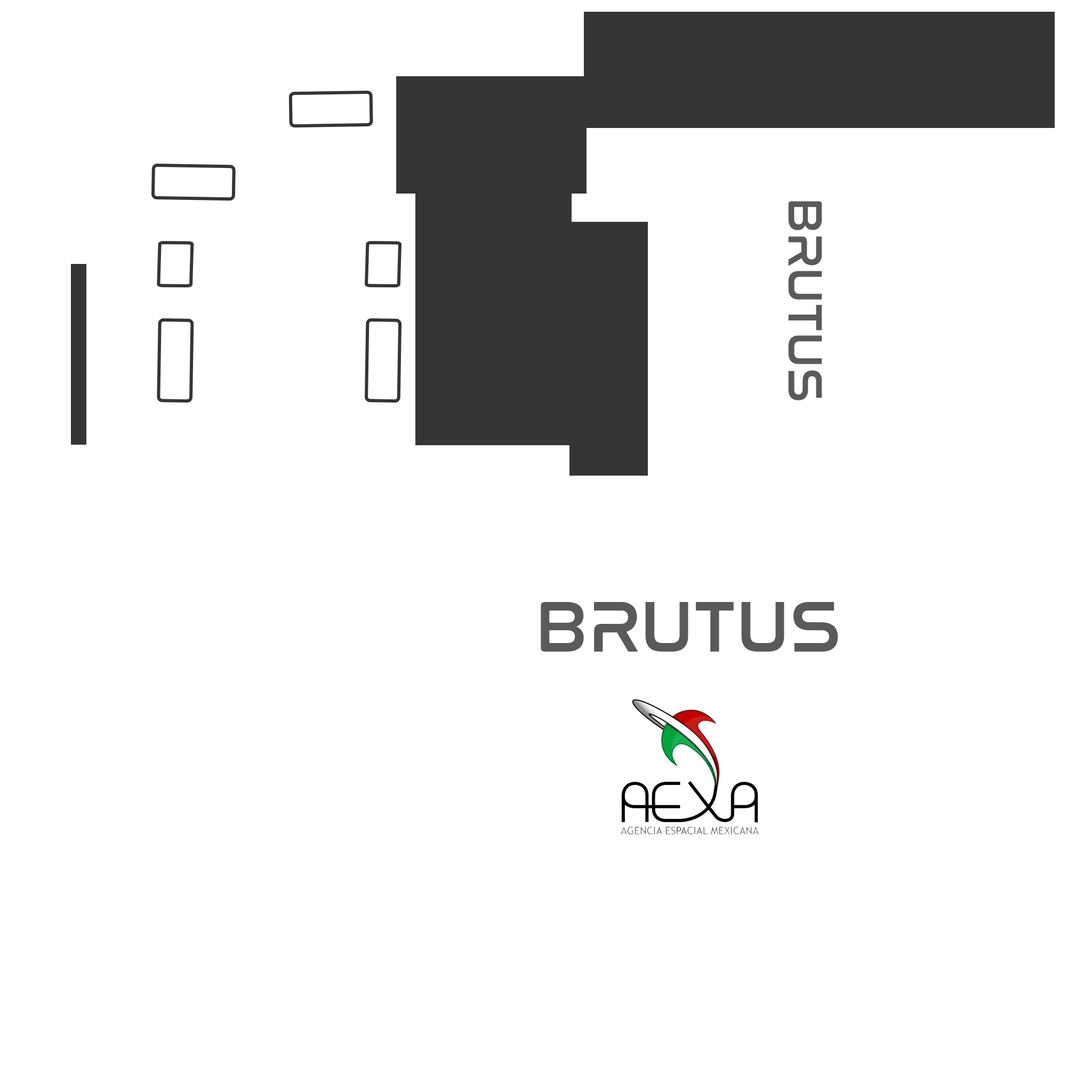
<style>
.page{position:relative;width:1092px;height:1092px;background:#ffffff}
.page>*{position:absolute;margin:0}
.t1{font:49.4px "NasalizationRg-Regular";color:#5b5a5a}
.t2{font:73.8px "NasalizationRg-Regular";color:#5b5a5a}
</style>
<div class="page">
<p class="t1" style="left:788px;top:201px;width:34px;height:199px;rotate:90deg">BRUTUS</p>
<p class="t2" style="left:541px;top:602px;width:297px;height:50px">BRUTUS</p>
</div>
